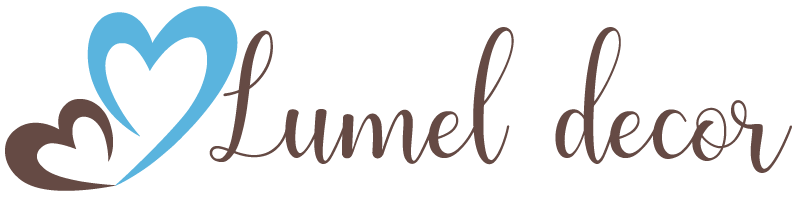
<style>
.page{position:relative;width:800px;height:200px;background:#ffffff}
.page>*{position:absolute;margin:0}
.t1{font:166.7px "Humble";color:#654a44}
</style>
<div class="page">
<p class="t1" style="left:209px;top:27px;width:583px;height:146px">Lumel decor</p>
</div>
